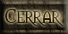
<style>
.page{position:relative;width:68px;height:34px}
.page>*{position:absolute;margin:0}
.t1{font:19px "Morpheus";color:#2f1c04}
</style>
<div class="page">
<p class="t1" style="left:5px;top:9px;width:60px;height:17px">Cerrar</p>
</div>
